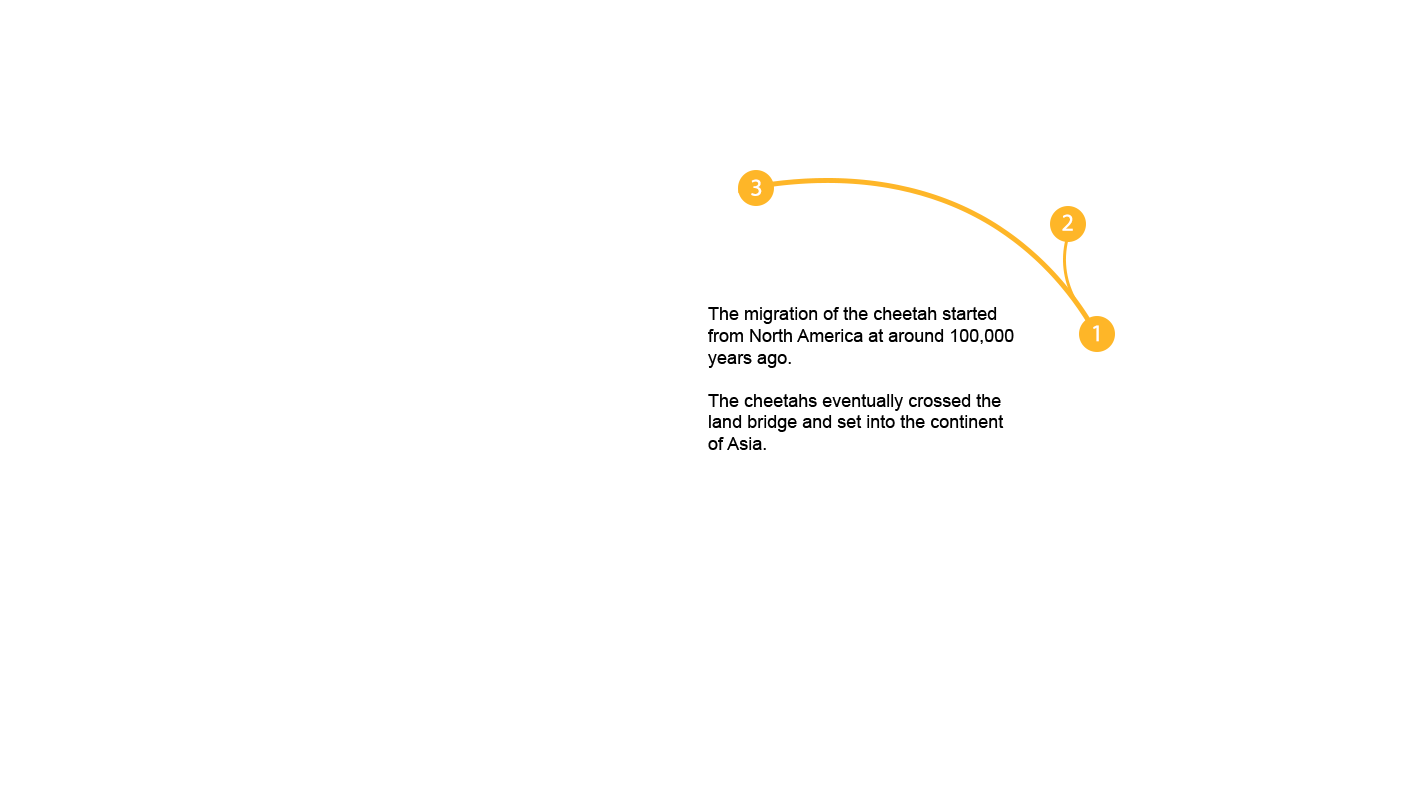
<style>
.page{position:relative;width:1415px;height:809px;background:#ffffff}
.page>*{position:absolute;margin:0}
.t1{font:18px "ArialMT";color:#000000}
</style>
<div class="page">
<p class="t1" style="left:708px;top:307px;width:306px;height:143px">The migration of the cheetah started<br>from North America at around 100,000<br>years ago.<br><br>The cheetahs eventually crossed the<br>land bridge and set into the continent<br>of Asia.</p>
</div>
